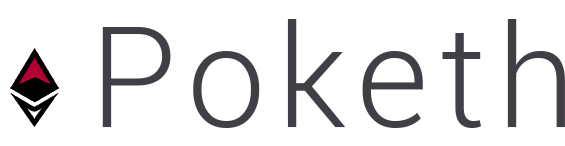
<style>
.page{position:relative;width:565px;height:146px;background:#ffffff}
.page>*{position:absolute;margin:0}
.t1{font:141px "Roboto-Light";letter-spacing:0.08em;color:#413f45}
</style>
<div class="page">
<p class="t1" style="left:102px;top:19px;width:463px;height:109px">Poketh</p>
<p class="t1" style="left:102px;top:19px;width:463px;height:109px">Poketh</p>
</div>
